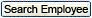
<style>
.page{position:relative;width:92px;height:18px}
.page>*{position:absolute;margin:0}
.t1{font:10.7px "ArialMT";color:#000000}
</style>
<div class="page">
<p class="t1" style="left:4px;top:5px;width:84px;height:10px">Search Employee</p>
</div>
